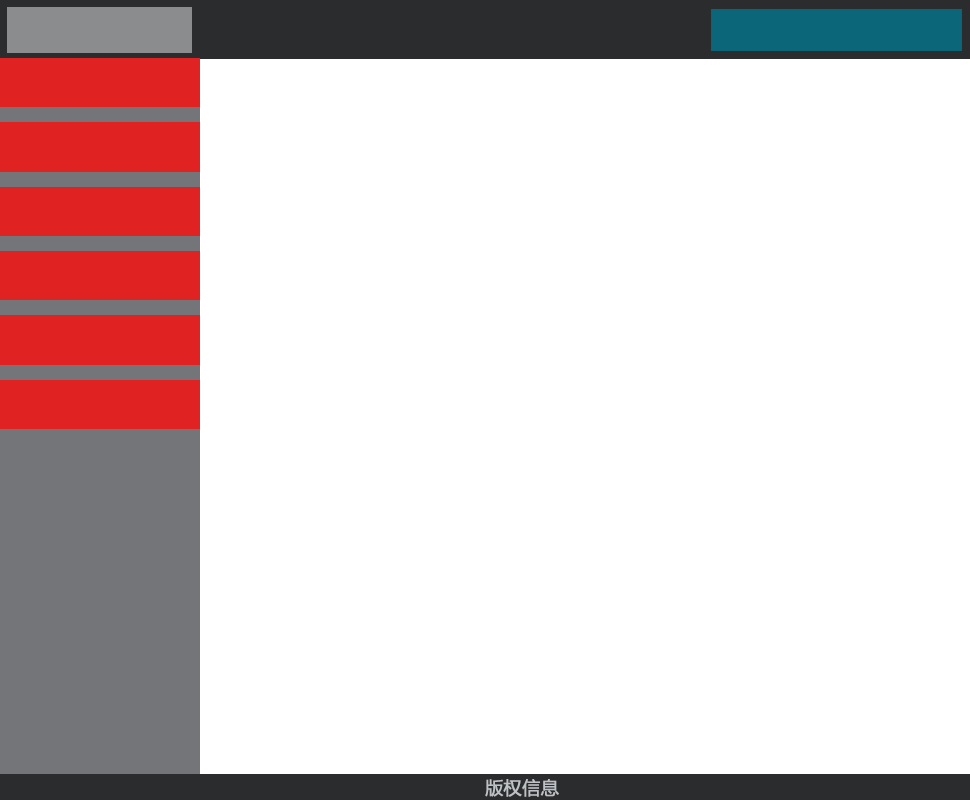
<style>
.page{position:relative;width:970px;height:800px;background:#ffffff}
.page>*{position:absolute;margin:0}
.t1{font:18px "MicrosoftYaHei";color:#bdc1c5;font-weight:bold}
</style>
<div class="page">
<p class="t1" style="left:485px;top:779px;width:74px;height:18px">版权信息</p>
</div>
